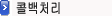
<style>
.page{position:relative;width:112px;height:16px;background:#fbf8f8}
.page>*{position:absolute;margin:0}
.t1{font:14px "GulimChe";color:#212121;text-transform:uppercase;font-weight:bold;scale:0.8 1}
</style>
<div class="page">
<p class="t1" style="left:16px;top:2px;width:44px;height:12px">콜백처리</p>
</div>
